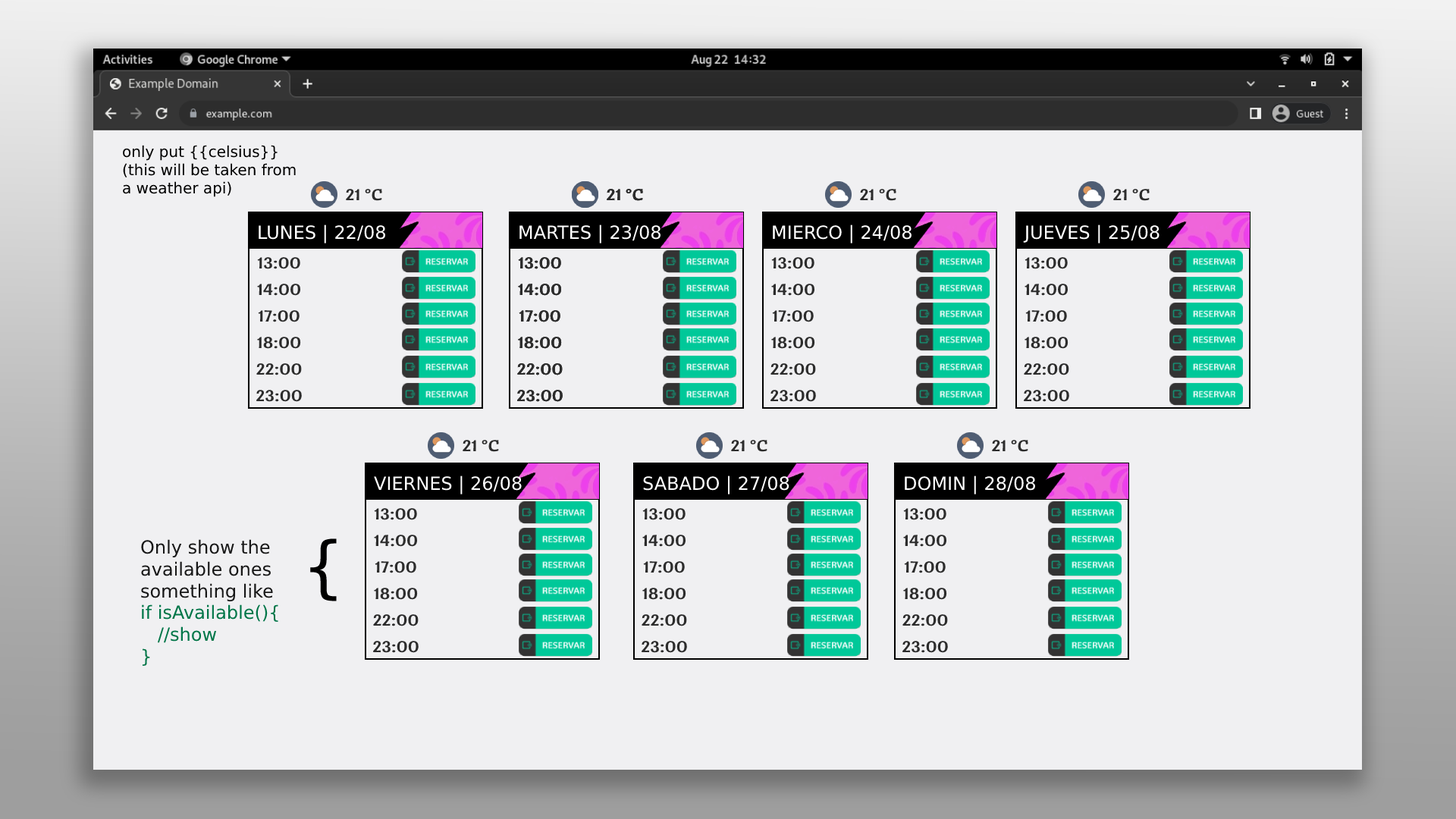
<style>
.page{position:relative;width:1456px;height:819px;background:#f0f0f2}
.page>*{position:absolute;margin:0}
.t1{font:15.2px "Corbel";color:#000000}
.t2{font:15.7px "CantoraOne-Regular";color:#2c2c2c;scale:1.2 1}
.t3{font:18.2px "Corbel";color:#ffffff}
.t4{font:15.7px/26.5px "CantoraOne-Regular";color:#2c2c2c;scale:1.2 1}
.t5{font:18.2px "Corbel";color:#181818}
.t6{font:18.2px "Corbel";color:#007648}
.t7{font:67.5px "Corbel";color:#000000}
</style>
<div class="page">
<p class="t1" style="left:123px;top:145px;width:173px;height:52px">only put {{celsius}} <br>(this will be taken from<br>a weather api)</p>
<p class="t2" style="left:346px;top:189px;width:36px;height:12px">21 °C</p>
<p class="t2" style="left:607px;top:189px;width:36px;height:12px">21 °C</p>
<p class="t2" style="left:607px;top:189px;width:36px;height:12px">21 °C</p>
<p class="t2" style="left:860px;top:189px;width:36px;height:12px">21 °C</p>
<p class="t2" style="left:1113px;top:189px;width:37px;height:12px">21 °C</p>
<p class="t3" style="left:259px;top:224px;width:126px;height:19px">LUNES | 22/08</p>
<p class="t3" style="left:519px;top:224px;width:141px;height:19px">MARTES | 23/08</p>
<p class="t3" style="left:773px;top:224px;width:139px;height:19px">MIERCO | 24/08</p>
<p class="t3" style="left:1023px;top:224px;width:136px;height:19px">JUEVES | 25/08</p>
<p class="t4" style="left:256px;top:257px;width:46px;height:145px;text-align:center">13:00<br>14:00<br>17:00<br>18:00<br>22:00<br>23:00</p>
<p class="t4" style="left:516px;top:257px;width:47px;height:145px;text-align:center">13:00<br>14:00<br>17:00<br>18:00<br>22:00<br>23:00</p>
<p class="t4" style="left:516px;top:257px;width:47px;height:145px;text-align:center">13:00<br>14:00<br>17:00<br>18:00<br>22:00<br>23:00</p>
<p class="t4" style="left:770px;top:257px;width:46px;height:145px;text-align:center">13:00<br>14:00<br>17:00<br>18:00<br>22:00<br>23:00</p>
<p class="t4" style="left:1023px;top:257px;width:46px;height:145px;text-align:center">13:00<br>14:00<br>17:00<br>18:00<br>22:00<br>23:00</p>
<p class="t2" style="left:463px;top:440px;width:36px;height:12px">21 °C</p>
<p class="t2" style="left:731px;top:440px;width:36px;height:12px">21 °C</p>
<p class="t2" style="left:992px;top:440px;width:36px;height:12px">21 °C</p>
<p class="t3" style="left:374px;top:475px;width:148px;height:19px">VIERNES | 26/08</p>
<p class="t3" style="left:643px;top:475px;width:146px;height:19px">SABADO | 27/08</p>
<p class="t3" style="left:905px;top:475px;width:130px;height:19px">DOMIN | 28/08</p>
<p class="t4" style="left:372px;top:508px;width:47px;height:145px;text-align:center">13:00<br>14:00<br>17:00<br>18:00<br>22:00<br>23:00</p>
<p class="t4" style="left:641px;top:508px;width:46px;height:145px;text-align:center">13:00<br>14:00<br>17:00<br>18:00<br>22:00<br>23:00</p>
<p class="t4" style="left:902px;top:508px;width:46px;height:145px;text-align:center">13:00<br>14:00<br>17:00<br>18:00<br>22:00<br>23:00</p>
<p class="t5" style="left:141px;top:539px;width:137px;height:127px">Only show the <br>available ones<br>something like<br><span class="t6">if isAvailable(){<br>   //show<br>}</span></p>
<p class="t7" style="left:310px;top:538px;width:27px;height:63px">{</p>
</div>
